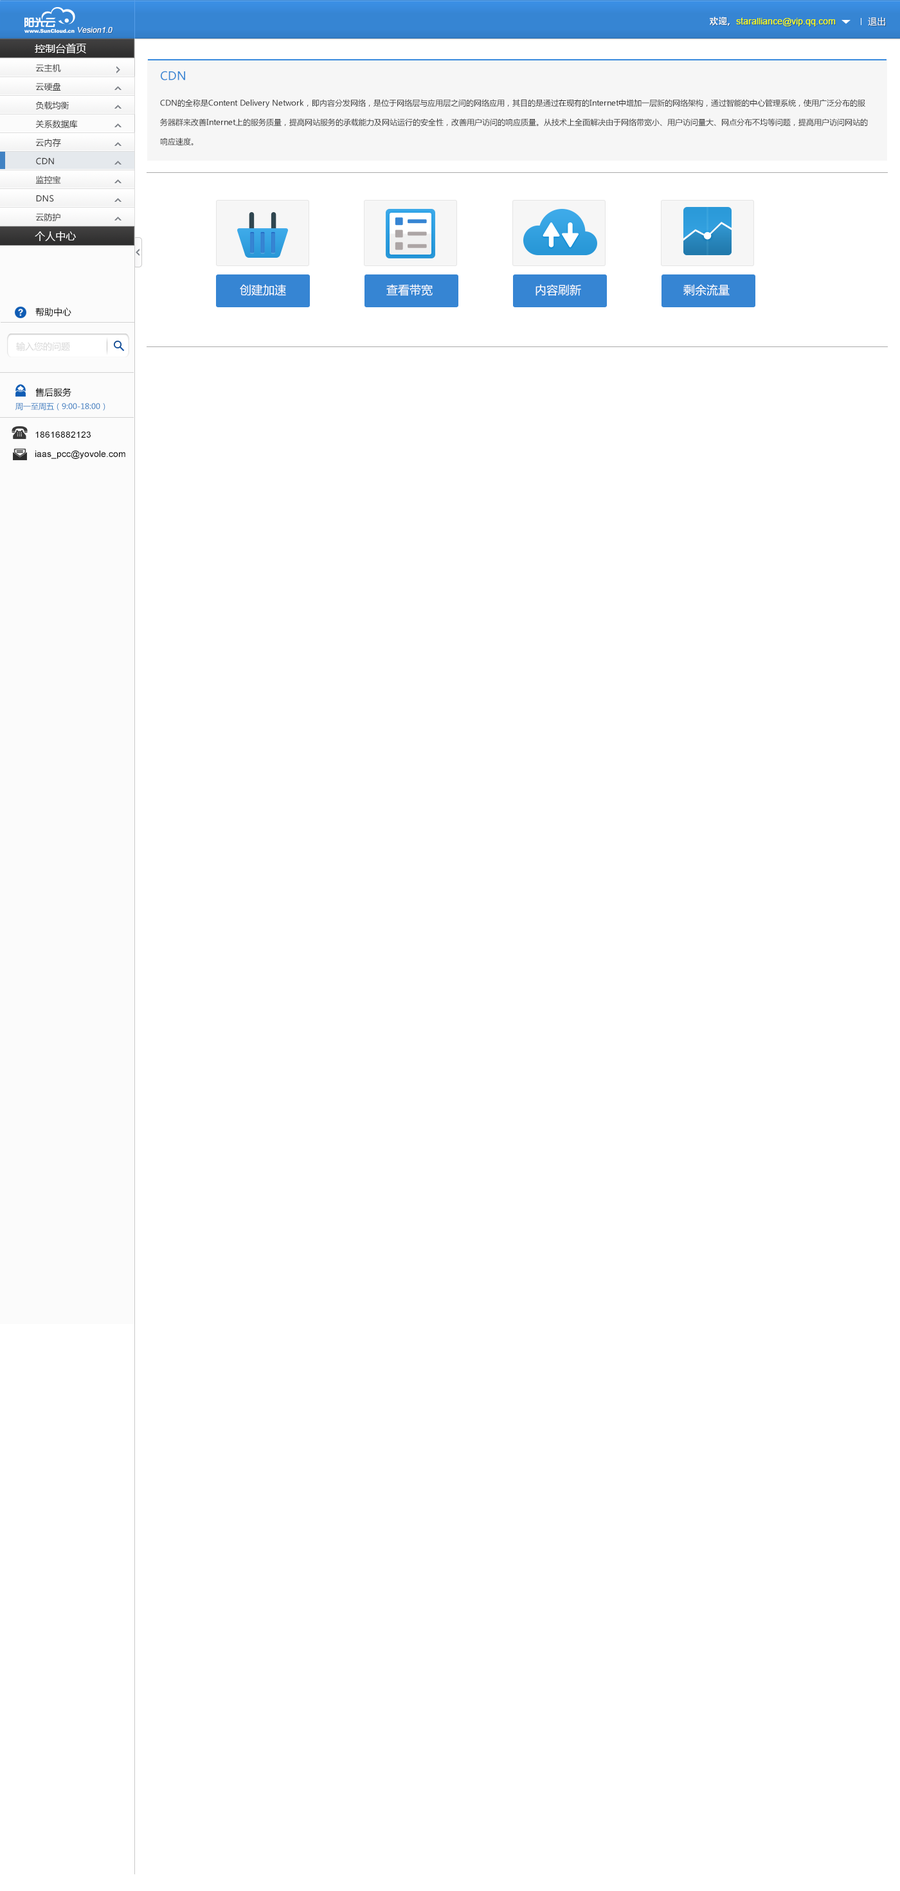
<style>
.page{position:relative;width:900px;height:1891px;background:#ffffff}
.page>*{position:absolute;margin:0}
.t1{font:9px "ArialMT";color:#fcff0e}
.t2{font:9px "AdobeHeitiStd-Regular";color:#ffffff}
.t3{font:9px "MicrosoftYaHei";color:#ffffff}
.t4{font:7.7px "ArialMT";color:#ffffff;font-style:italic}
.t5{font:10.3px "MicrosoftYaHei";color:#ffffff}
.t6{font:8.4px "MicrosoftYaHei";color:#333333}
.t7{font:11.6px "MicrosoftYaHei";color:#3685d3}
.t8{font:7.7px/19.3px "MicrosoftYaHei";color:#333333}
.t9{font:11.6px "MicrosoftYaHei";color:#ffffff}
.t10{font:9px "MicrosoftYaHei";color:#000000}
.t11{font:9px "MicrosoftYaHei";color:#d7d7d7}
.t12{font:7.7px "MicrosoftYaHei";color:#4182c3}
.t13{font:9px/6.4px "ArialMT";color:#000000}
</style>
<div class="page">
<p class="t1" style="left:710px;top:17px;width:126px;height:9px"><span class="t2">欢迎，</span>staralliance@vip.qq.com</p>
<p class="t3" style="left:868px;top:17px;width:17px;height:9px">退出</p>
<p class="t4" style="left:78px;top:27px;width:35px;height:6px">Vesion1.0</p>
<p class="t5" style="left:35px;top:43px;width:51px;height:11px">控制台首页</p>
<p class="t6" style="left:35px;top:64px;width:26px;height:9px">云主机</p>
<p class="t7" style="left:161px;top:71px;width:24px;height:9px">CDN</p>
<p class="t6" style="left:35px;top:82px;width:26px;height:9px">云硬盘</p>
<p class="t6" style="left:35px;top:101px;width:34px;height:9px">负载均衡</p>
<p class="t8" style="left:160px;top:99px;width:708px;height:47px">CDN的全称是Content Delivery Network，即内容分发网络，是位于网络层与应用层之间的网络应用，其目的是通过在现有的Internet中增加一层新的网络架构，通过智能的中心管理系统，使用广泛分布的服务器群来改善Internet上的服务质量，提高网站服务的承载能力及网站运行的安全性，改善用户访问的响应质量。从技术上全面解决由于网络带宽小、用户访问量大、网点分布不均等问题，提高用户访问网站的响应速度。</p>
<p class="t6" style="left:35px;top:120px;width:43px;height:9px">关系数据库</p>
<p class="t6" style="left:35px;top:138px;width:26px;height:9px">云内存</p>
<p class="t6" style="left:36px;top:158px;width:18px;height:7px">CDN</p>
<p class="t6" style="left:35px;top:176px;width:26px;height:8px">监控宝</p>
<p class="t6" style="left:36px;top:195px;width:18px;height:7px">DNS</p>
<p class="t6" style="left:35px;top:213px;width:25px;height:9px">云防护</p>
<p class="t5" style="left:35px;top:231px;width:41px;height:10px">个人中心</p>
<p class="t9" style="left:240px;top:284px;width:46px;height:12px">创建加速</p>
<p class="t9" style="left:386px;top:284px;width:47px;height:12px">查看带宽</p>
<p class="t9" style="left:536px;top:284px;width:45px;height:12px">内容刷新</p>
<p class="t9" style="left:683px;top:284px;width:47px;height:12px">剩余流量</p>
<p class="t10" style="left:35px;top:307px;width:36px;height:10px">帮助中心</p>
<p class="t11" style="left:16px;top:342px;width:54px;height:9px">输入您的问题</p>
<p class="t10" style="left:35px;top:388px;width:36px;height:9px">售后服务</p>
<p class="t12" style="left:15px;top:403px;width:90px;height:8px">周一至周五（9:00-18:00）</p>
<p class="t13" style="left:35px;top:431px;width:90px;height:28px">18616882123   <br><br><br>iaas_pcc@yovole.com</p>
</div>
